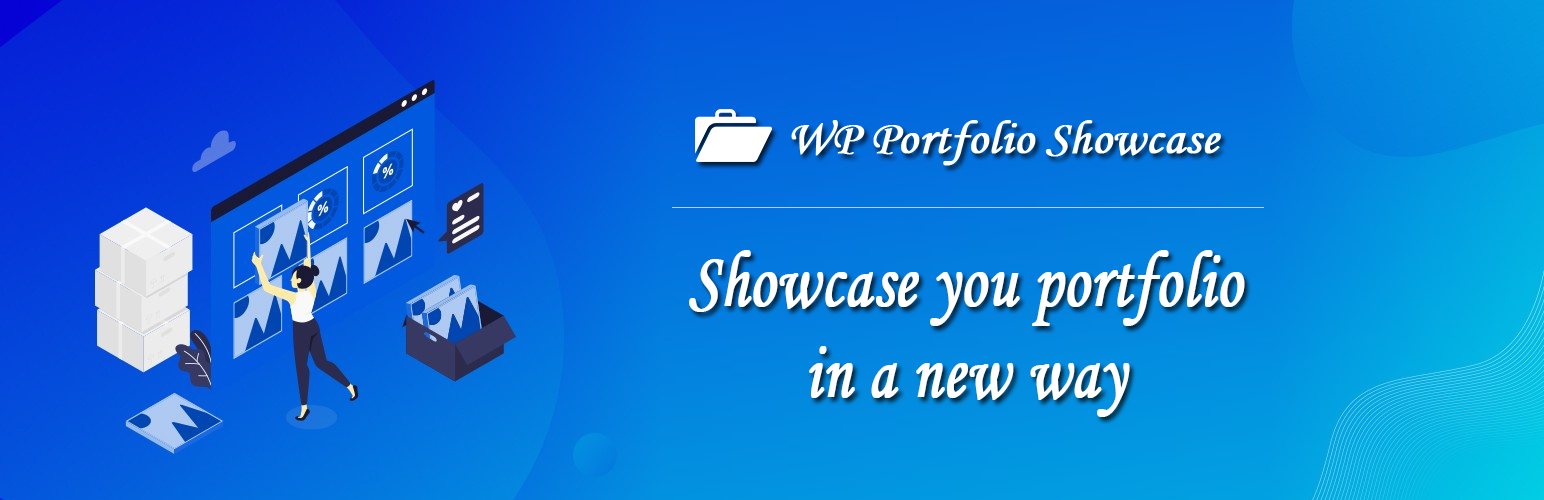
<style>
.page{position:relative;width:1544px;height:500px}
.page>*{position:absolute;margin:0}
.t1{font:48px "MonotypeCorsiva";color:#ffffff;font-weight:bold}
.t2{font:80.2px/91.9px "MonotypeCorsiva";color:#ffffff;font-weight:bold;scale:0.79 1}
</style>
<div class="page">
<p class="t1" style="left:791px;top:120px;width:430px;height:46px">WP Portfolio Showcase</p>
<p class="t2" style="left:689px;top:250px;width:556px;height:167px;text-align:center">Showcase you portfolio<br>in a new way</p>
</div>
